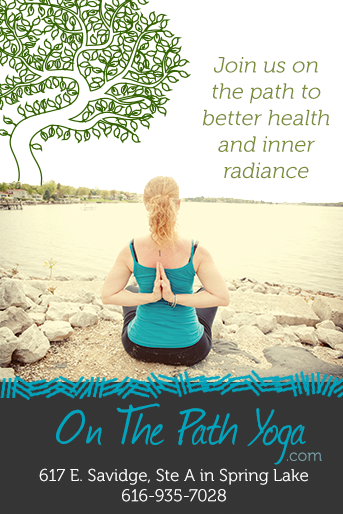
<style>
.page{position:relative;width:343px;height:514px;background:#ffffff}
.page>*{position:absolute;margin:0}
.t1{font:22px "Museo-300";color:#7a8c37;font-style:italic}
.t2{font:60px "Journal";color:#00a4bd}
.t3{font:16px "Museo-300";color:#7aa5ac}
.t4{font:17px "Museo-300";color:#ffffff}
</style>
<div class="page">
<p class="t1" style="left:202px;top:57px;width:127px;height:122px;text-align:center">Join us on the path to better health and inner <br>radiance</p>
<p class="t2" style="left:56px;top:403px;width:250px;height:62px">On The Path Yoga</p>
<p class="t3" style="left:287px;top:452px;width:35px;height:9px">.com</p>
<p class="t4" style="left:39px;top:468px;width:269px;height:34px;text-align:center">617 E. Savidge, Ste A in Spring Lake<br>616-935-7028</p>
</div>
